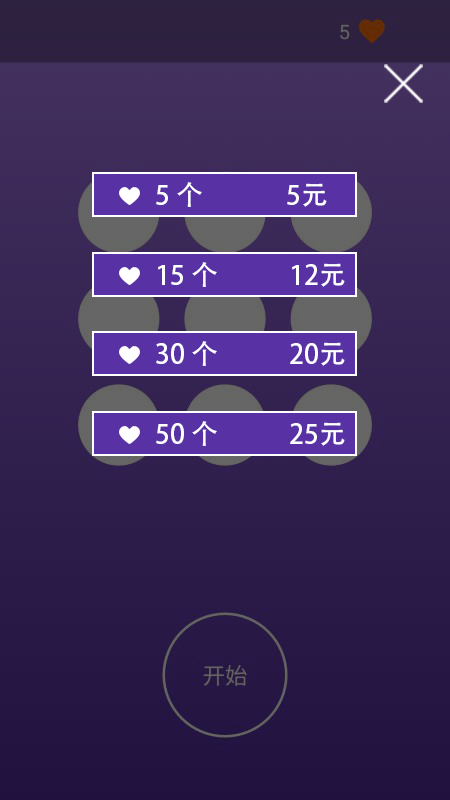
<style>
.page{position:relative;width:450px;height:800px}
.page>*{position:absolute;margin:0}
.t1{font:26.7px "AdobeHeitiStd-Regular";color:#ffffff}
</style>
<div class="page">
<p class="t1" style="left:156px;top:182px;width:171px;height:25px">5 个              5元</p>
<p class="t1" style="left:158px;top:262px;width:187px;height:25px">15 个            12元</p>
<p class="t1" style="left:156px;top:341px;width:189px;height:25px">30 个            20元</p>
<p class="t1" style="left:156px;top:421px;width:189px;height:25px">50 个            25元</p>
</div>
